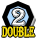
<style>
.page{position:relative;width:36px;height:40px;background:#ffffff}
.page>*{position:absolute;margin:0}
.t1{font:24.7px "Algerian";color:#ffffff}
.t2{font:14.8px "Algerian";color:#fee512;scale:0.6 1}
</style>
<div class="page">
<p class="t1" style="left:12px;top:8px;width:13px;height:18px">2</p>
<p class="t2" style="left:2px;top:26px;width:33px;height:11px">DOUBLE</p>
</div>
